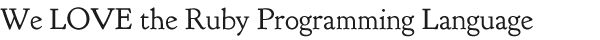
<style>
.page{position:relative;width:600px;height:40px;background:#ffffff}
.page>*{position:absolute;margin:0}
.t1{font:30px "GoudyBookletter1911";color:#1d1b1b}
</style>
<div class="page">
<p class="t1" style="left:0px;top:7px;width:533px;height:30px">We LOVE the Ruby Programming Language</p>
</div>
